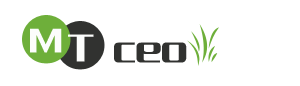
<style>
.page{position:relative;width:300px;height:86px;background:#ffffff}
.page>*{position:absolute;margin:0}
.t1{font:36px "FZCQFW--GB1-0";color:#fcfdfc;font-weight:bold}
.t2{font:41px "FZCQFW--GB1-0";color:#fcfdfc;font-weight:bold}
.t3{font:41px "FZCQFW--GB1-0";color:#313230;font-weight:bold}
</style>
<div class="page">
<p class="t1" style="left:30px;top:28px;width:32px;height:25px">M</p>
<p class="t2" style="left:68px;top:34px;width:26px;height:28px">T</p>
<p class="t3" style="left:114px;top:42px;width:73px;height:21px">ceo</p>
</div>
